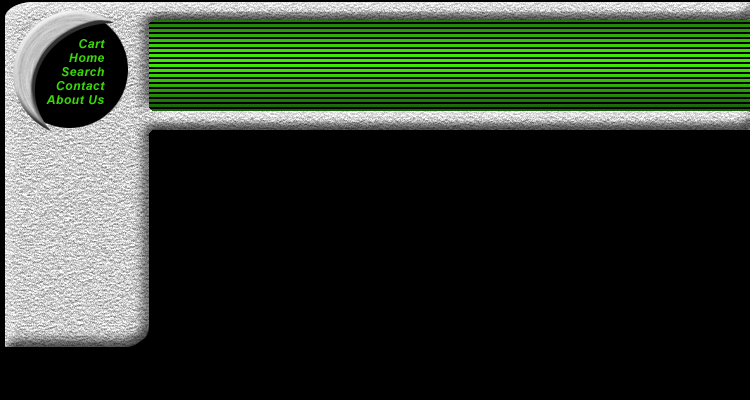
<style>
.page{position:relative;width:750px;height:400px;background:#000000}
.page>*{position:absolute;margin:0}
.t1{font:12px/14px "Arial-BoldItalicMT";letter-spacing:0.05em;color:#39d509}
</style>
<div class="page">
<p class="t1" style="left:46px;top:39px;width:59px;height:66px;text-align:right">Cart<br>      Home<br>    Search<br>  Contact<br>About Us</p>
</div>
